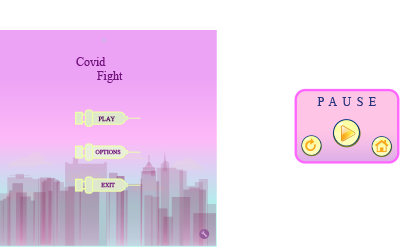
<style>
.page{position:relative;width:400px;height:247px;background:#ffffff}
.page>*{position:absolute;margin:0}
.t1{font:12px "OldNewspaperTypes";color:#72147e}
.t2{font:12px "OldNewspaperTypes";color:#26327d}
.t3{font:6.5px "OldNewspaperTypes";color:#560f5f}
.t4{font:6px "OldNewspaperTypes"}
</style>
<div class="page">
<p class="t1" style="left:76px;top:57px;width:47px;height:26px">Covid <br>       Fight</p>
<p class="t2" style="left:317px;top:97px;width:59px;height:9px">PAUSE</p>
<p class="t3" style="left:98px;top:116px;width:17px;height:6px">PLAY</p>
<p class="t4" style="left:95px;top:149px;width:26px;height:6px">OPTIONS</p>
<p class="t4" style="left:101px;top:182px;width:14px;height:6px">EXIT</p>
</div>
